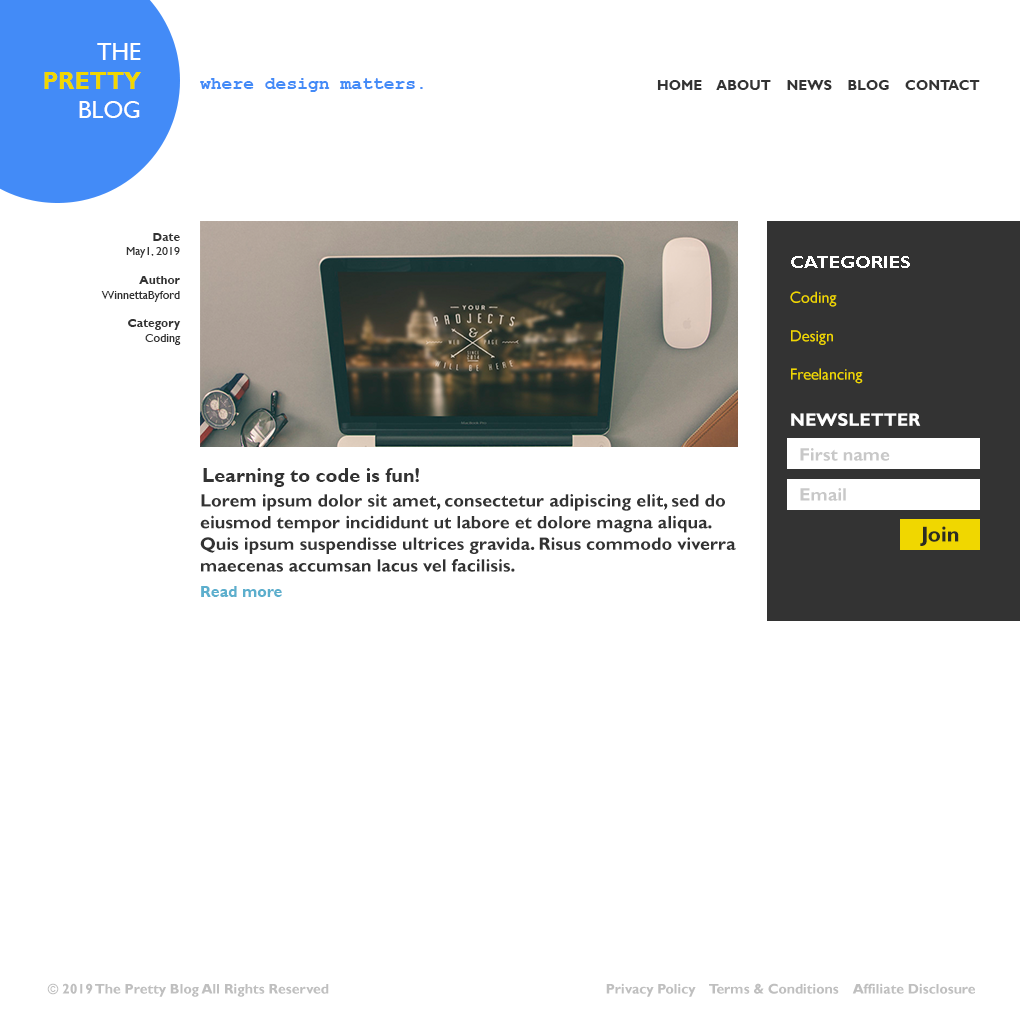
<style>
.page{position:relative;width:1020px;height:1020px;background:#ffffff}
.page>*{position:absolute;margin:0}
.t1{font:24px "GillSansMT-Bold";color:#f0d700}
.t2{font:24px "GillSansMT";color:#ffffff}
.t3{font:18px "CourierNewPS-BoldMT";color:#438bf7}
.t4{font:14px "GillSansMT-Bold";color:#333333}
.t5{font:12px "GillSansMT";color:#333333}
.t6{font:12px "GillSansMT-Bold";color:#333333}
.t7{font:18px "GillSansMT-Bold";color:#ffffff}
.t8{font:16px "GillSansMT";color:#f0d700}
.t9{font:18px "GillSansMT-Bold";color:#c8c8c8}
.t10{font:20px "GillSansMT-Bold";color:#333333}
.t11{font:18px "GillSansMT-Bold";color:#333333}
.t12{font:21.8px "GillSansMT-Bold";color:#2b2c22}
.t13{font:16px "GillSansMT-Bold";color:#5cafcd}
.t14{font:14px "GillSansMT-Bold";color:#bfbfbf}
.t15{font:13.9px "GillSansMT-Bold";color:#bfbfbf}
</style>
<div class="page">
<p class="t1" style="left:44px;top:43px;width:97px;height:75px;text-align:right"><span class="t2">THE<br></span>PRETTY<br><span class="t2">BLOG</span></p>
<p class="t3" style="left:200px;top:78px;width:223px;height:14px">where design matters.</p>
<p class="t4" style="left:657px;top:80px;width:323px;height:10px">HOME    ABOUT    NEWS    BLOG    CONTACT</p>
<p class="t5" style="left:101px;top:233px;width:80px;height:112px;text-align:right"><span class="t6">Date <br></span>May1, 2019<br><span class="t6"><br>Author<br></span>WinnettaByford<br><span class="t6"><br>Category<br></span>Coding</p>
<p class="t7" style="left:791px;top:256px;width:119px;height:12px">CATEGORIES</p>
<p class="t8" style="left:790px;top:291px;width:73px;height:93px">Coding<br><br>Design<br><br>Freelancing</p>
<p class="t7" style="left:791px;top:413px;width:130px;height:13px">NEWSLETTER</p>
<p class="t9" style="left:800px;top:448px;width:90px;height:13px">First name</p>
<p class="t10" style="left:203px;top:468px;width:216px;height:19px">Learning to code is fun!</p>
<p class="t11" style="left:200px;top:494px;width:536px;height:78px">Lorem ipsum dolor sit amet, consectetur adipiscing elit, sed do eiusmod tempor incididunt ut labore et dolore magna aliqua. Quis ipsum suspendisse ultrices gravida. Risus commodo viverra maecenas accumsan lacus vel facilisis.</p>
<p class="t9" style="left:800px;top:488px;width:46px;height:13px">Email</p>
<p class="t12" style="left:920px;top:526px;width:39px;height:20px">Join</p>
<p class="t13" style="left:201px;top:586px;width:81px;height:11px">Read more</p>
<p class="t14" style="left:47px;top:983px;width:282px;height:14px">© 2019 The Pretty Blog All Rights Reserved</p>
<p class="t15" style="left:606px;top:983px;width:369px;height:14px">Privacy Policy    Terms &amp; Conditions    Affiliate Disclosure</p>
</div>
